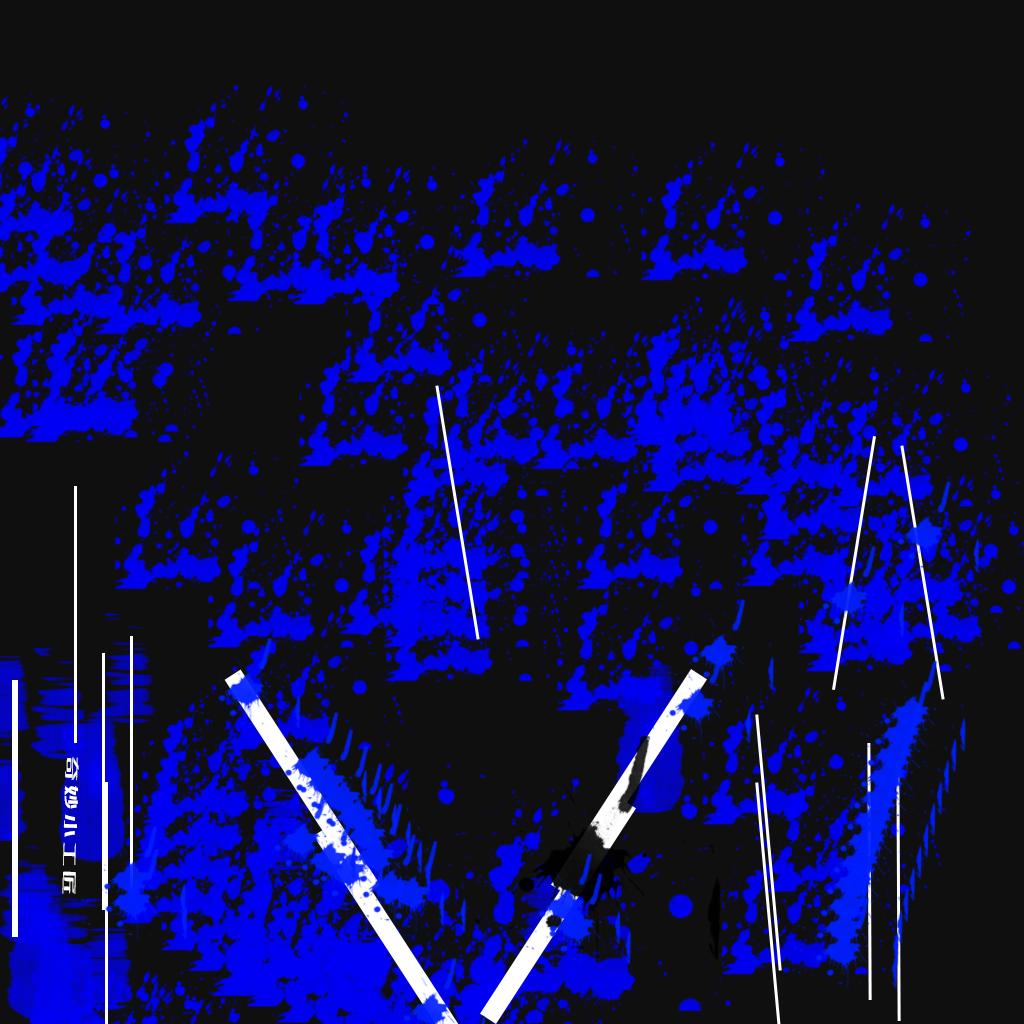
<style>
.page{position:relative;width:1024px;height:1024px;background:#0f0f0f}
.page>*{position:absolute;margin:0}
.t1{font:13.9px "MFLangQian_Noncommercial-Regular";letter-spacing:0.2em;color:#ffffff;scale:1.71 1}
</style>
<div class="page">
<p class="t1" style="left:62px;top:757px;width:17px;height:137px;rotate:91deg">奇妙小工匠</p>
</div>
